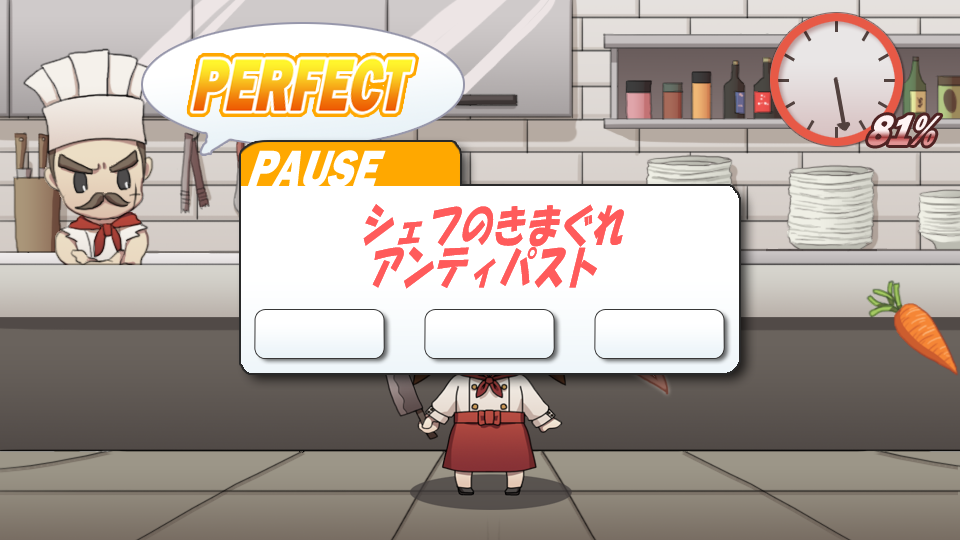
<style>
.page{position:relative;width:960px;height:540px}
.page>*{position:absolute;margin:0}
.t1{font:47.1px "FranklinGothic-Heavy";scale:0.76 1}
.t2{font:57.7px "FranklinGothic-Heavy";color:#ffffff;scale:0.72 1}
.t3{font:47.3px/43px "HGSoeiKakupoptai";color:#ff5b5b;scale:0.7 1}
</style>
<div class="page">
<p class="t1" style="left:868px;top:115px;width:73px;height:31px">81%</p>
<p class="t2" style="left:247px;top:150px;width:139px;height:38px">PAUSE</p>
<p class="t3" style="left:363px;top:204px;width:261px;height:85px;text-align:center">シェフのきまぐれ<br>アンティパスト</p>
<p class="t3" style="left:363px;top:204px;width:261px;height:85px;text-align:center">シェフのきまぐれ<br>アンティパスト</p>
</div>
